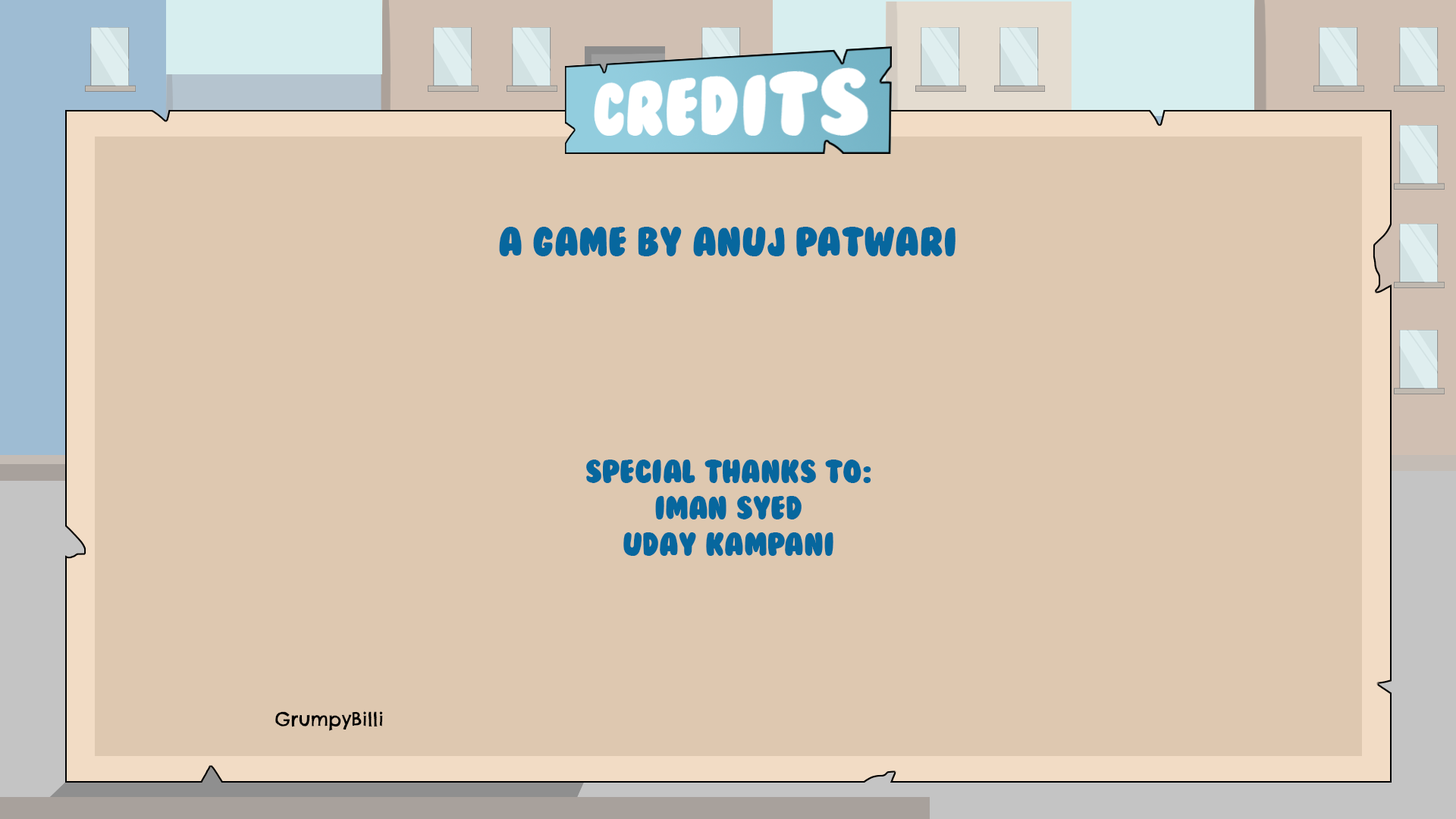
<style>
.page{position:relative;width:1456px;height:819px;background:#dec8b0}
.page>*{position:absolute;margin:0}
.t1{font:37.9px "BubbleGum";color:#07679e}
.t2{font:30.3px "BubbleGum";color:#07679e}
.t3{font:18.5px "ChelseaMarket-Regular";color:#000000}
</style>
<div class="page">
<p class="t1" style="left:499px;top:227px;width:456px;height:29px">A GAME BY ANUJ PATWARI</p>
<p class="t2" style="left:586px;top:460px;width:285px;height:96px;text-align:center">Special Thanks to:<br>Iman Syed<br>Uday Kampani</p>
<p class="t3" style="left:275px;top:711px;width:108px;height:20px">GrumpyBilli</p>
</div>
